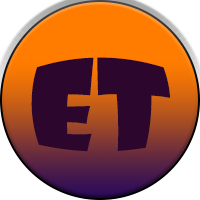
<style>
.page{position:relative;width:200px;height:200px;background:#2d062d}
.page>*{position:absolute;margin:0}
.t1{font:100px "ShowcardGothic-Reg";color:#2d062d}
</style>
<div class="page">
<p class="t1" style="left:31px;top:57px;width:140px;height:95px">ET</p>
</div>
